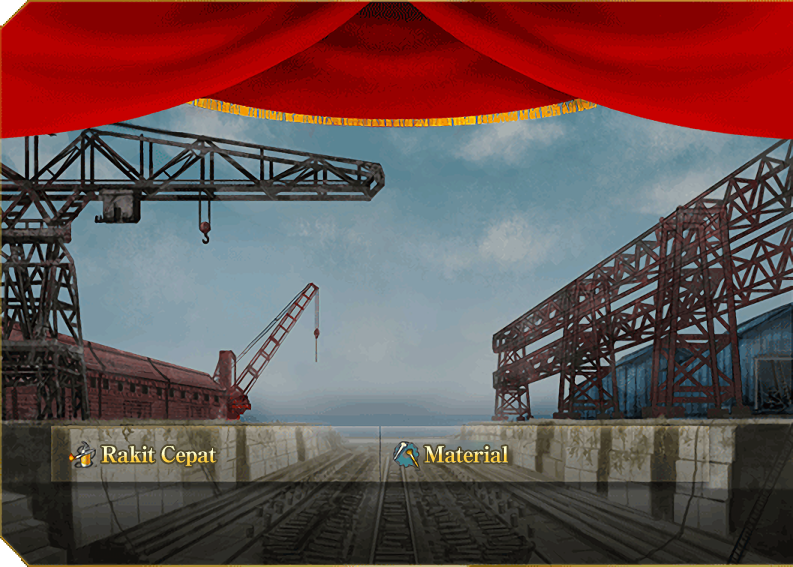
<style>
.page{position:relative;width:793px;height:567px}
.page>*{position:absolute;margin:0}
.t1{font:22px "RyuminPro-ExBold";letter-spacing:-0.04em}
</style>
<div class="page">
<p class="t1" style="left:101px;top:446px;width:116px;height:20px">Rakit Cepat</p>
<p class="t1" style="left:424px;top:446px;width:84px;height:17px">Material</p>
</div>
